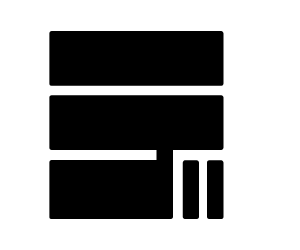
<style>
.page{position:relative;width:300px;height:250px;background:#ffffff}
.page>*{position:absolute;margin:0}
.t1{font:241.8px "TA-rb0925";letter-spacing:0.08em;color:#000000}
</style>
<div class="page">
<p class="t1" style="left:49px;top:31px;width:175px;height:188px">デ</p>
</div>
